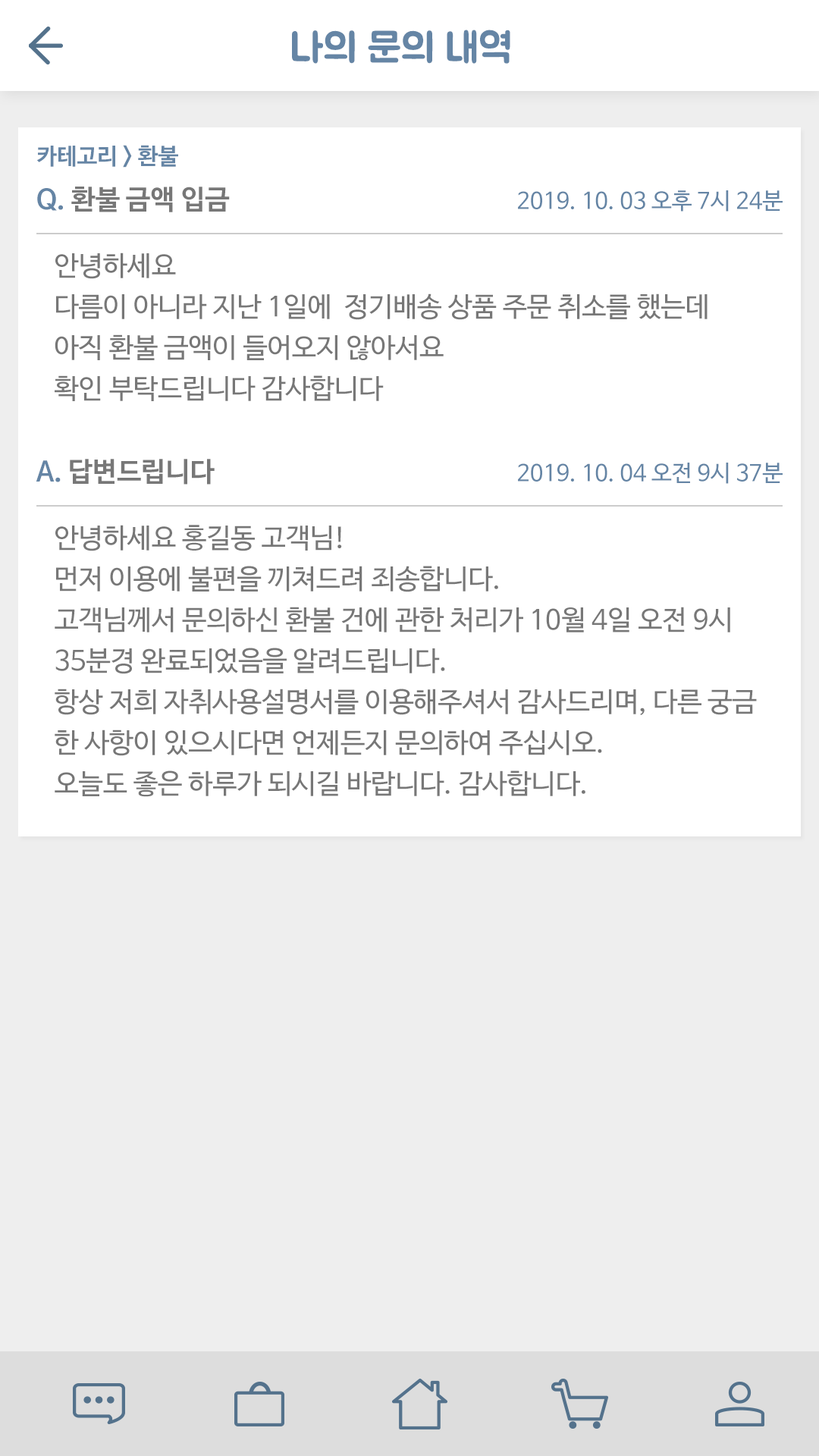
<style>
.page{position:relative;width:819px;height:1456px;background:#ffffff}
.page>*{position:absolute;margin:0}
.t1{font:40.9px "BMJUA";color:#6585a5}
.t2{font:22.7px "NanumBarunGothicBold";color:#6585a5}
.t3{font:27.3px "NanumBarunGothicBold";color:#777777}
.t4{font:27.3px "NanumBarunGothicBold";color:#6585a5}
.t5{font:22.7px "NanumBarunGothic";color:#6585a5}
.t6{font:27.3px/40.9px "NanumBarunGothic";color:#777777}
</style>
<div class="page">
<p class="t1" style="left:292px;top:30px;width:218px;height:34px">나의 문의 내역</p>
<p class="t2" style="left:36px;top:145px;width:142px;height:23px">카테고리 &gt; 환불</p>
<p class="t3" style="left:37px;top:187px;width:193px;height:25px"><span class="t4">Q.</span> 환불 금액 입금</p>
<p class="t5" style="left:518px;top:190px;width:265px;height:22px">2019. 10. 03 오후 7시 24분</p>
<p class="t6" style="left:55px;top:253px;width:653px;height:148px">안녕하세요<br>다름이 아니라 지난 1일에  정기배송 상품 주문 취소를 했는데<br>아직 환불 금액이 들어오지 않아서요<br>확인 부탁드립니다 감사합니다</p>
<p class="t3" style="left:36px;top:459px;width:179px;height:26px"><span class="t4">A. </span>답변드립니다</p>
<p class="t5" style="left:518px;top:463px;width:265px;height:21px">2019. 10. 04 오전 9시 37분</p>
<p class="t6" style="left:55px;top:525px;width:702px;height:272px">안녕하세요 홍길동 고객님!<br>먼저 이용에 불편을 끼쳐드려 죄송합니다.<br>고객님께서 문의하신 환불 건에 관한 처리가 10월 4일 오전 9시<br>35분경 완료되었음을 알려드립니다.<br>항상 저희 자취사용설명서를 이용해주셔서 감사드리며, 다른 궁금<br>한 사항이 있으시다면 언제든지 문의하여 주십시오.<br>오늘도 좋은 하루가 되시길 바랍니다. 감사합니다.</p>
</div>
